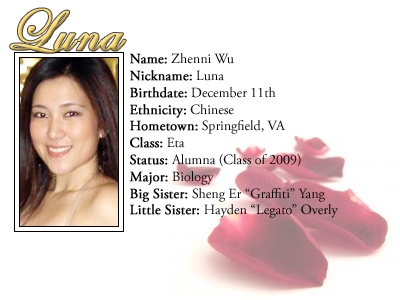
<style>
.page{position:relative;width:400px;height:300px;background:#ffffff}
.page>*{position:absolute;margin:0}
.t1{font:60px "EdwardianScriptITC";font-weight:bold}
.t2{font:14px "AGaramondPro-Regular";color:#000000}
.t3{font:14px "AGaramondPro-Regular";color:#000000;font-weight:bold}
</style>
<div class="page">
<p class="t1" style="left:10px;top:8px;width:116px;height:45px">Luna</p>
<p class="t2" style="left:129px;top:53px;width:209px;height:165px"><span class="t3">Name:</span> Zhenni Wu<br><span class="t3">Nickname:</span> Luna<br><span class="t3">Birthdate:</span> December 11th<br><span class="t3">Ethnicity:</span> Chinese<br><span class="t3">Hometown:</span> Springfield, VA<br><span class="t3">Class:</span> Eta<br><span class="t3">Status: </span>Alumna (Class of 2009)<br><span class="t3">Major:</span> Biology<br><span class="t3">Big Sister: </span>Sheng Er “Graffiti” Yang<br><span class="t3">Little Sister: </span>Hayden “Legato” Overly</p>
</div>
